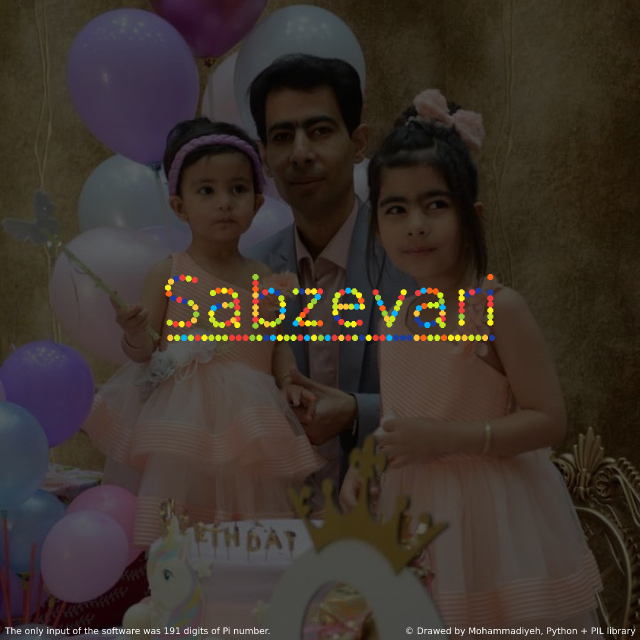
<style>
.page{position:relative;width:640px;height:640px}
.page>*{position:absolute;margin:0}
.t1{font:9px "DejaVuSans";color:#ffffff}
</style>
<div class="page">
<p class="t1" style="left:4px;top:627px;width:632px;height:9px">The only input of the software was 191 digits of Pi number.                                               © Drawed by Mohammadiyeh, Python + PIL library</p>
</div>
